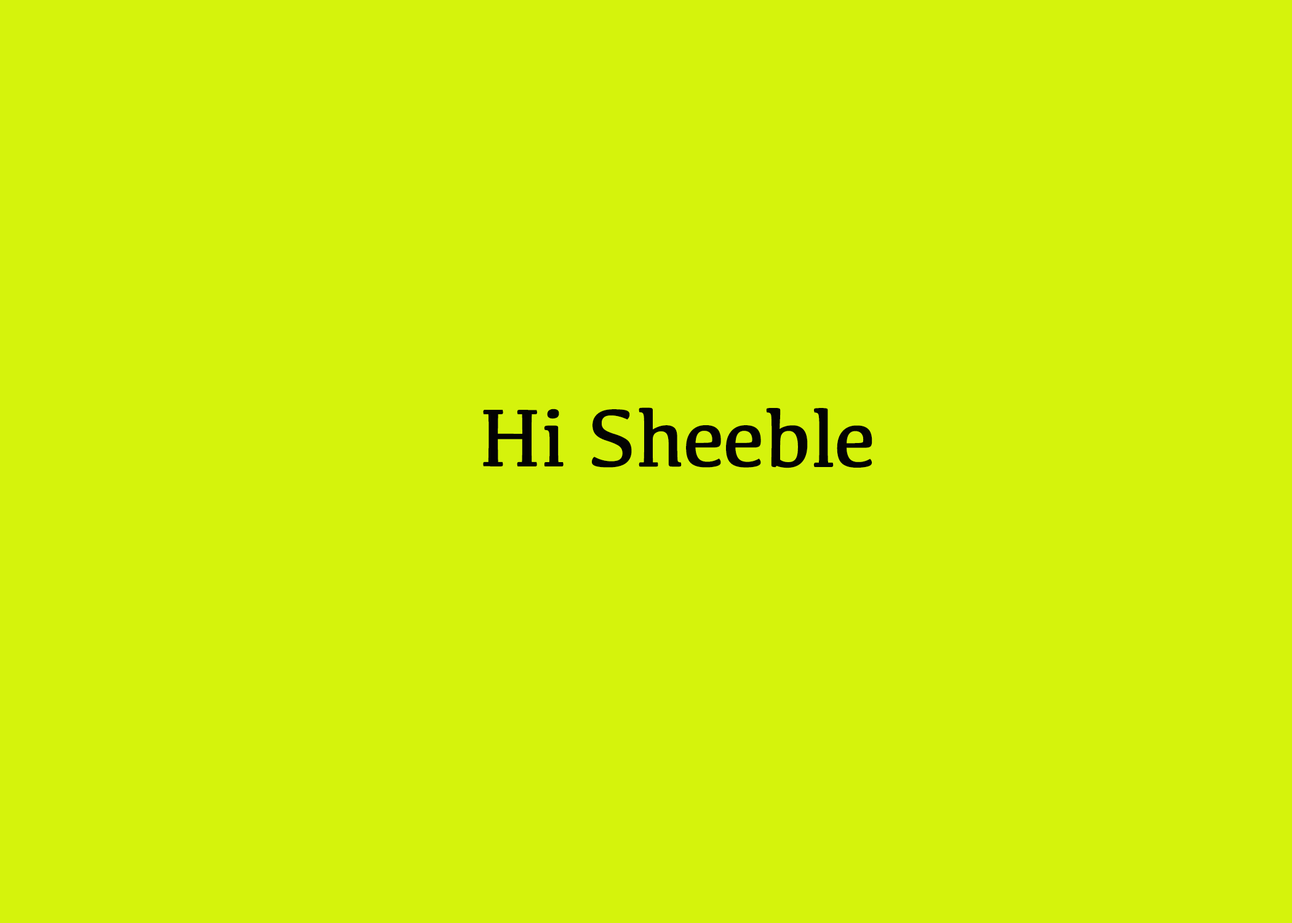
<style>
.page{position:relative;width:1292px;height:923px;background:#d5f30c}
.page>*{position:absolute;margin:0}
.t1{font:84.6px "Kefa-Regular";color:#030303}
</style>
<div class="page">
<p class="t1" style="left:483px;top:407px;width:389px;height:61px">Hi Sheeble</p>
</div>
